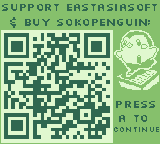
<style>
.page{position:relative;width:160px;height:144px;background:#e0f8cf}
.page>*{position:absolute;margin:0}
.t1{font:12px "Silkscreen";color:#306850}
.t2{font:8px "Silkscreen";letter-spacing:0.07em;color:#306850}
</style>
<div class="page">
<p class="t1" style="left:2px;top:3px;width:155px;height:25px;text-align:center">Support eastasiasoft<br>&amp; buy SokoPenguin:</p>
<p class="t1" style="left:113px;top:100px;width:46px;height:32px;text-align:center">Press<br>A to <br><span class="t2">continue</span></p>
</div>
